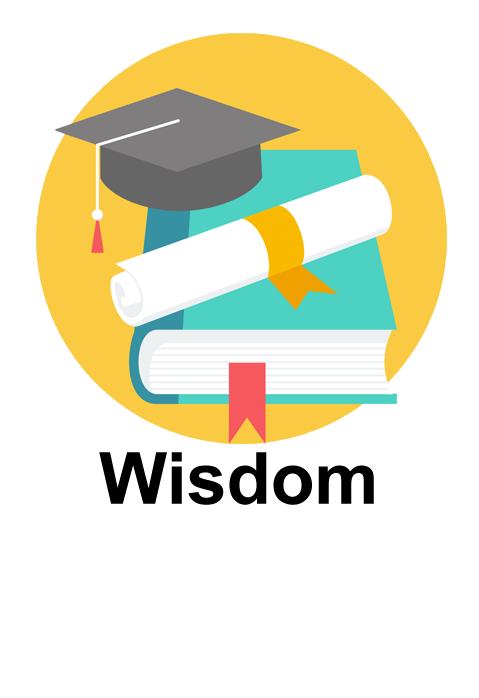
<style>
.page{position:relative;width:479px;height:698px;background:#ffffff}
.page>*{position:absolute;margin:0}
.t1{font:72px "Arial-BoldMT";color:#000000}
</style>
<div class="page">
<p class="t1" style="left:99px;top:452px;width:275px;height:53px">Wisdom</p>
</div>
